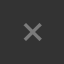
<style>
.page{position:relative;width:64px;height:64px;background:#333333}
.page>*{position:absolute;margin:0}
.t1{font:25px "SegoeUISymbol";color:#7b7b7b}
</style>
<div class="page">
<p class="t1" style="left:23px;top:23px;width:19px;height:18px">✖</p>
</div>
